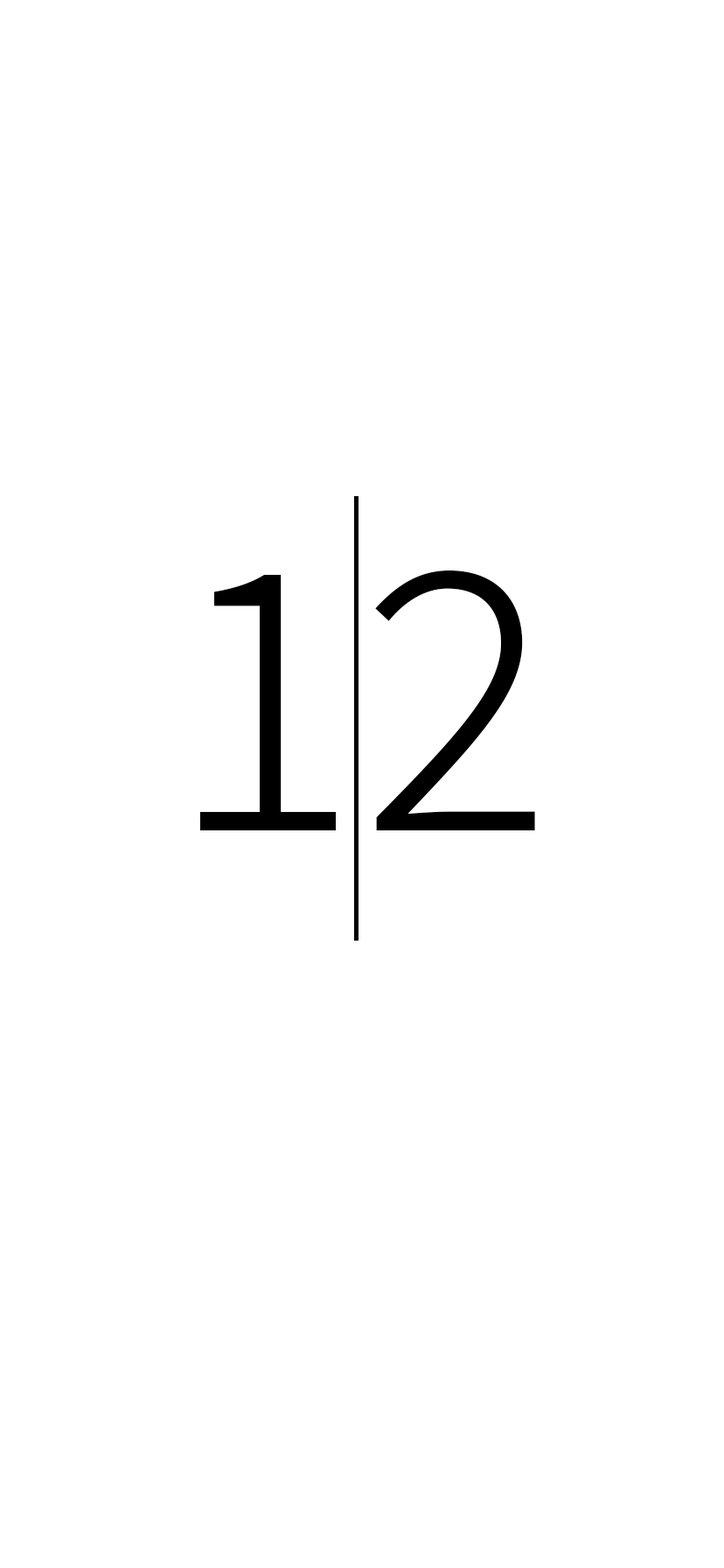
<style>
.page{position:relative;width:724px;height:1568px;background:#ffffff}
.page>*{position:absolute;margin:0}
.t1{font:361.3px "NotoSansTC-Light";color:#000000}
</style>
<div class="page">
<p class="t1" style="left:200px;top:570px;width:336px;height:260px">12</p>
</div>
